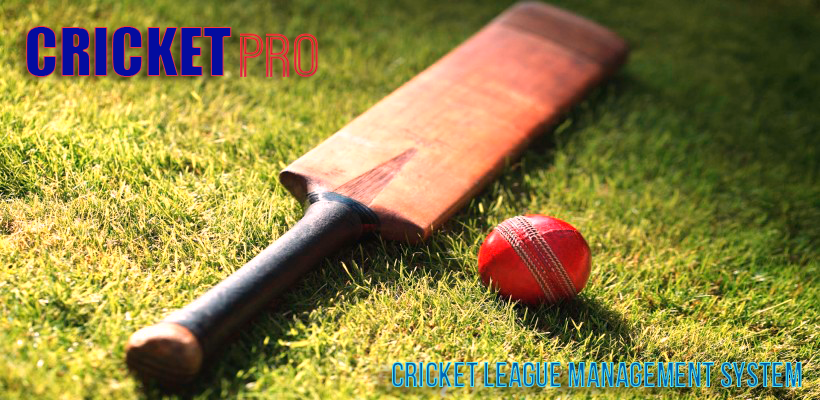
<style>
.page{position:relative;width:820px;height:400px}
.page>*{position:absolute;margin:0}
.t1{font:61.8px "Impact";color:#040c9f}
.t2{font:58.7px "OstrichSans-Bold";color:#e12d33;scale:1.16 1}
.t3{font:34.7px "BebasNeueBold"}
</style>
<div class="page">
<p class="t1" style="left:26px;top:26px;width:206px;height:51px">CRICKET</p>
<p class="t2" style="left:240px;top:33px;width:78px;height:44px">PRO</p>
<p class="t3" style="left:392px;top:362px;width:410px;height:25px">cricket league management system</p>
</div>
